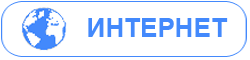
<style>
.page{position:relative;width:250px;height:60px;background:#ffffff}
.page>*{position:absolute;margin:0}
.t1{font:26px "Arial-BoldMT";color:#4389fc}
</style>
<div class="page">
<p class="t1" style="left:88px;top:18px;width:140px;height:19px">ИНТЕРНЕТ</p>
</div>
